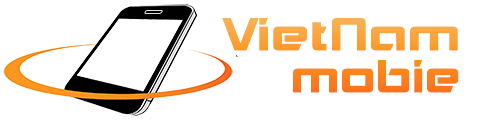
<style>
.page{position:relative;width:500px;height:120px;background:#ffffff}
.page>*{position:absolute;margin:0}
.t1{font:44px/42px "UTM-Akashi";scale:1.3 1}
.t2{font:44px/42px "UTM-Akashi";scale:1.2 1}
</style>
<div class="page">
<p class="t1" style="left:222px;top:18px;width:237px;height:75px;text-align:right">VietNam<br><span class="t2">mobie</span></p>
</div>
